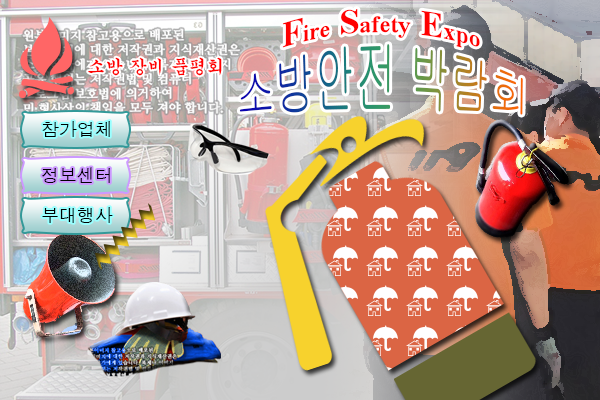
<style>
.page{position:relative;width:600px;height:400px}
.page>*{position:absolute;margin:0}
.t1{font:24px "TimesNewRomanPS-BoldMT";color:#ff0000}
.t2{font:36px "TimesNewRomanPS-BoldMT";color:#ff0000}
.t3{font:40px "Gulim"}
.t4{font:18px "Gungsuh";color:#ff0000}
.t5{font:18px "Dotum";color:#000000}
</style>
<div class="page">
<p class="t1" style="left:282px;top:9px;width:198px;height:39px"><span class="t2">F</span>ire<span class="t2"> S</span>afety<span class="t2"> E</span>xpo</p>
<p class="t3" style="left:239px;top:44px;width:284px;height:71px">소방안전 박람회</p>
<p class="t4" style="left:88px;top:57px;width:134px;height:19px">소방 장비 품평회</p>
<p class="t5" style="left:42px;top:121px;width:68px;height:16px">참가업체</p>
<p class="t5" style="left:42px;top:167px;width:68px;height:16px">정보센터</p>
<p class="t5" style="left:42px;top:207px;width:71px;height:16px">부대행사</p>
</div>
